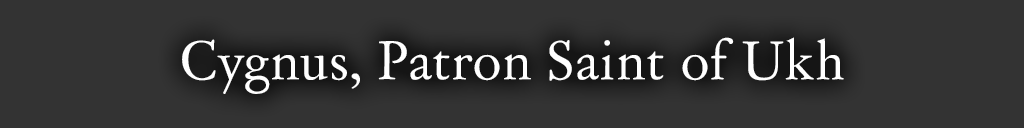
<style>
.page{position:relative;width:1024px;height:128px;background:#333333}
.page>*{position:absolute;margin:0}
.t1{font:52px "DayRoman";color:#ffffff}
</style>
<div class="page">
<p class="t1" style="left:182px;top:37px;width:662px;height:57px">Cygnus, Patron Saint of Ukh</p>
</div>
